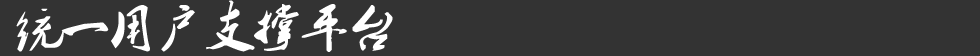
<style>
.page{position:relative;width:980px;height:56px;background:#333333}
.page>*{position:absolute;margin:0}
.t1{font:48px "2.0-";color:#ffffff}
</style>
<div class="page">
<p class="t1" style="left:16px;top:0px;width:377px;height:52px">统一用户支撑平台</p>
</div>
